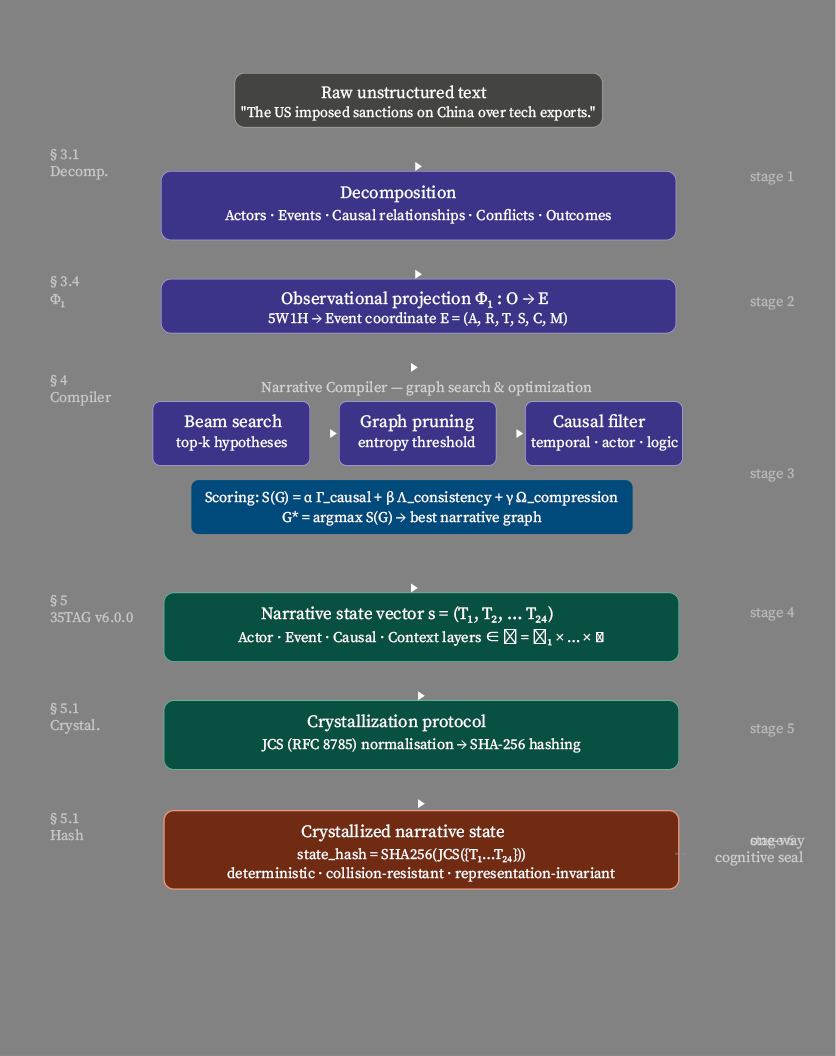
<style>
.page{position:relative;width:836px;height:1056px;background:#828282}
.page>*{position:absolute;margin:0}
.t1{font:17.2px "SourceSerifRoman-Regular";color:#ffffff;scale:0.97 1}
.t2{font:14.7px "SourceSerifRoman-Regular";color:#ffffff;scale:0.97 1}
.t3{font:14.7px "SourceSerifRoman-Regular";color:#c7c7c7}
.t4{font:14.7px "SourceSerifRoman-Regular";color:#bababa}
.t5{font:17.2px "SourceSerifRoman-Regular";color:#ffffff}
.t6{font:14.7px "SourceSerifRoman-Regular";color:#ffffff}
.t7{font:14.7px "SourceSerifRoman-Regular";color:#d3d3d3}
.t8{font:14.7px "SourceSerifRoman-Regular";color:#cdcdcd}
.t9{font:14.7px "SourceSerifRoman-Regular";color:#c0c0c0}
</style>
<div class="page">
<p class="t1" style="left:321px;top:85px;width:166px;height:14px">Raw unstructured text</p>
<p class="t2" style="left:241px;top:106px;width:354px;height:15px">"The US imposed sanctions on China over tech exports."</p>
<p class="t3" style="left:50px;top:148px;width:29px;height:13px">§ 3.1</p>
<p class="t3" style="left:50px;top:166px;width:58px;height:14px">Decomp.</p>
<p class="t4" style="left:750px;top:171px;width:44px;height:14px">stage 1</p>
<p class="t5" style="left:340px;top:185px;width:116px;height:18px">Decomposition</p>
<p class="t6" style="left:225px;top:208px;width:386px;height:16px">Actors · Events · Causal relationships · Conflicts · Outcomes</p>
<p class="t3" style="left:50px;top:275px;width:30px;height:13px">§ 3.4</p>
<p class="t3" style="left:50px;top:293px;width:15px;height:15px">Φ₁</p>
<p class="t5" style="left:281px;top:291px;width:267px;height:18px">Observational projection Φ₁ : O → E</p>
<p class="t4" style="left:750px;top:296px;width:44px;height:14px">stage 2</p>
<p class="t6" style="left:268px;top:312px;width:299px;height:15px">5W1H → Event coordinate E = (A, R, T, S, C, M)</p>
<p class="t3" style="left:50px;top:374px;width:18px;height:13px">§ 4</p>
<p class="t7" style="left:261px;top:381px;width:331px;height:15px">Narrative Compiler — graph search &amp; optimization</p>
<p class="t3" style="left:50px;top:391px;width:62px;height:15px">Compiler</p>
<p class="t5" style="left:184px;top:414px;width:98px;height:14px">Beam search</p>
<p class="t5" style="left:360px;top:414px;width:114px;height:18px">Graph pruning</p>
<p class="t5" style="left:553px;top:414px;width:93px;height:14px">Causal filter</p>
<p class="t6" style="left:176px;top:436px;width:111px;height:15px">top-k hypotheses</p>
<p class="t6" style="left:358px;top:436px;width:118px;height:15px">entropy threshold</p>
<p class="t6" style="left:531px;top:436px;width:147px;height:15px">temporal · actor · logic</p>
<p class="t4" style="left:750px;top:468px;width:44px;height:14px">stage 3</p>
<p class="t6" style="left:205px;top:491px;width:413px;height:15px">Scoring: S(G) = α Γ_causal + β Λ_consistency + γ Ω_compression</p>
<p class="t6" style="left:282px;top:510px;width:260px;height:16px">G* = argmax S(G) → best narrative graph</p>
<p class="t3" style="left:50px;top:594px;width:17px;height:13px">§ 5</p>
<p class="t5" style="left:261px;top:606px;width:292px;height:17px">Narrative state vector s = (T₁, T₂, … T₂₄)</p>
<p class="t3" style="left:50px;top:611px;width:83px;height:12px">35TAG v6.0.0</p>
<p class="t4" style="left:750px;top:607px;width:45px;height:14px">stage 4</p>
<p class="t3" style="left:50px;top:702px;width:29px;height:13px">§ 5.1</p>
<p class="t3" style="left:50px;top:719px;width:50px;height:15px">Crystal.</p>
<p class="t5" style="left:307px;top:714px;width:179px;height:18px">Crystallization protocol</p>
<p class="t4" style="left:750px;top:723px;width:44px;height:14px">stage 5</p>
<p class="t6" style="left:261px;top:738px;width:320px;height:15px">JCS (RFC 8785) normalisation → SHA-256 hashing</p>
<p class="t3" style="left:50px;top:812px;width:29px;height:13px">§ 5.1</p>
<p class="t3" style="left:50px;top:829px;width:34px;height:12px">Hash</p>
<p class="t5" style="left:301px;top:824px;width:203px;height:18px">Crystallized narrative state</p>
<p class="t8" style="left:750px;top:837px;width:55px;height:12px">one-way</p>
<p class="t9" style="left:750px;top:835px;width:44px;height:14px">stage 6</p>
<p class="t6" style="left:297px;top:848px;width:228px;height:15px">state_hash = SHA256(JCS({T₁…T₂₄}))</p>
<p class="t8" style="left:715px;top:851px;width:89px;height:15px">cognitive seal</p>
<p class="t6" style="left:227px;top:867px;width:388px;height:15px">deterministic · collision-resistant · representation-invariant</p>
</div>
